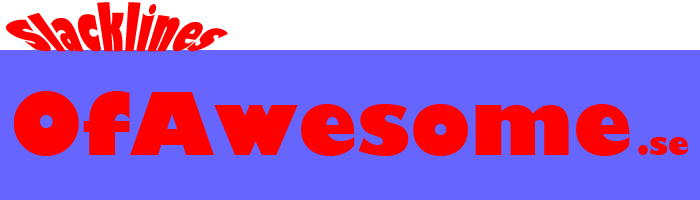
<style>
.page{position:relative;width:700px;height:200px;background:#6666ff}
.page>*{position:absolute;margin:0}
.t1{font:30px "GillSans-UltraBold";color:#ff0000}
.t2{font:85px "GillSans-UltraBold";color:#ff0000}
</style>
<div class="page">
<p class="t1" style="left:6px;top:2px;width:222px;height:50px">Slacklines</p>
<p class="t2" style="left:13px;top:91px;width:617px;height:65px">OfAwesome</p>
<p class="t1" style="left:638px;top:137px;width:50px;height:18px">.se</p>
</div>
